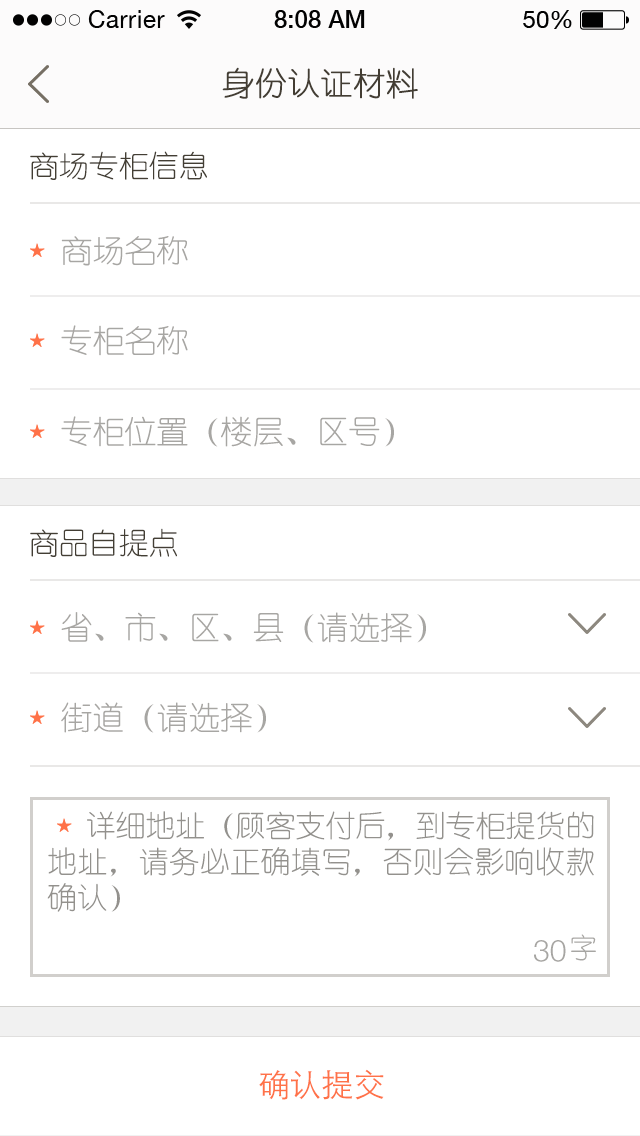
<style>
.page{position:relative;width:640px;height:1136px;background:#ffffff}
.page>*{position:absolute;margin:0}
.t1{font:32px "YouYuan";color:#433d33;text-transform:uppercase;font-weight:bold}
.t2{font:30px "YouYuan";color:#433e34;text-transform:uppercase}
.t3{font:32px "YouYuan";color:#a7a6a3;text-transform:uppercase}
.t4{font:30px "YouYuan";color:#93918d;text-transform:uppercase}
.t5{font:30px "HelveticaNeueLTPro-Lt";color:#a7a6a3;text-transform:uppercase}
.t6{font:28px "YouYuan";color:#a7a6a3;text-transform:uppercase}
.t7{font:32px "STHeitiSC-Light";color:#ff7248;text-transform:uppercase}
</style>
<div class="page">
<p class="t1" style="left:222px;top:67px;width:196px;height:32px">身份认证材料</p>
<p class="t2" style="left:30px;top:151px;width:177px;height:29px">商场专柜信息</p>
<p class="t3" style="left:61px;top:236px;width:127px;height:30px">商场名称</p>
<p class="t3" style="left:61px;top:325px;width:127px;height:31px">专柜名称</p>
<p class="t3" style="left:61px;top:416px;width:333px;height:31px">专柜位置（楼层、区号）</p>
<p class="t2" style="left:30px;top:528px;width:147px;height:29px">商品自提点</p>
<p class="t3" style="left:61px;top:612px;width:365px;height:31px">省、市、区、县（请选择）</p>
<p class="t3" style="left:61px;top:702px;width:205px;height:31px">街道（请选择）</p>
<p class="t4" style="left:47px;top:811px;width:547px;height:101px;text-align:justify">详细地址（顾客支付后，到专柜提货的地址，请务必正确填写，否则会影响收款确认）</p>
<p class="t5" style="left:534px;top:940px;width:32px;height:22px">30</p>
<p class="t6" style="left:571px;top:934px;width:25px;height:27px">字</p>
<p class="t7" style="left:259px;top:1069px;width:125px;height:31px">确认提交</p>
</div>
